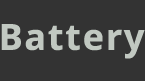
<style>
.page{position:relative;width:145px;height:81px;background:#333333}
.page>*{position:absolute;margin:0}
.t1{font:36px "NotoSans-Bold";letter-spacing:0.05em;color:#c1c8c1}
</style>
<div class="page">
<p class="t1" style="left:1px;top:24px;width:144px;height:35px">Battery</p>
</div>
